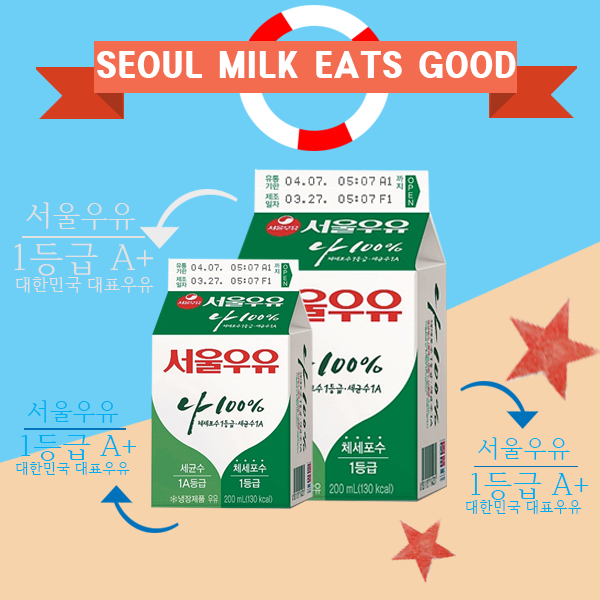
<style>
.page{position:relative;width:600px;height:600px;background:#6dcff6}
.page>*{position:absolute;margin:0}
.t1{font:30.7px "HeadlineR-HM";color:#ffffff;scale:0.95 1}
.t2{font:28.6px "HCRBatang";color:#e1e1e1}
.t3{font:35.8px "HCRBatang";color:#e1e1e1}
.t4{font:17.5px "HCRBatang";color:#e1e1e1}
.t5{font:23.6px "HCRBatang";color:#00aeef}
.t6{font:29.5px "HCRBatang";color:#00aeef}
.t7{font:24.2px "HCRBatang";color:#00aeef}
.t8{font:14.4px "HCRBatang";color:#00aeef}
.t9{font:30.3px "HCRBatang";color:#00aeef}
.t10{font:14.8px "HCRBatang";color:#00aeef}
</style>
<div class="page">
<p class="t1" style="left:97px;top:51px;width:419px;height:27px">SEOUL MILK EATS GOOD</p>
<p class="t2" style="left:26px;top:202px;width:110px;height:28px">서울우유</p>
<p class="t3" style="left:14px;top:243px;width:139px;height:33px">1등급 A+</p>
<p class="t4" style="left:15px;top:277px;width:139px;height:16px">대한민국 대표우유</p>
<p class="t5" style="left:28px;top:400px;width:91px;height:23px">서울우유</p>
<p class="t6" style="left:21px;top:434px;width:116px;height:27px">1등급 A+</p>
<p class="t7" style="left:478px;top:437px;width:92px;height:23px">서울우유</p>
<p class="t8" style="left:16px;top:462px;width:114px;height:13px">대한민국 대표우유</p>
<p class="t9" style="left:471px;top:472px;width:118px;height:28px">1등급 A+</p>
<p class="t10" style="left:465px;top:500px;width:117px;height:14px">대한민국 대표우유</p>
</div>
